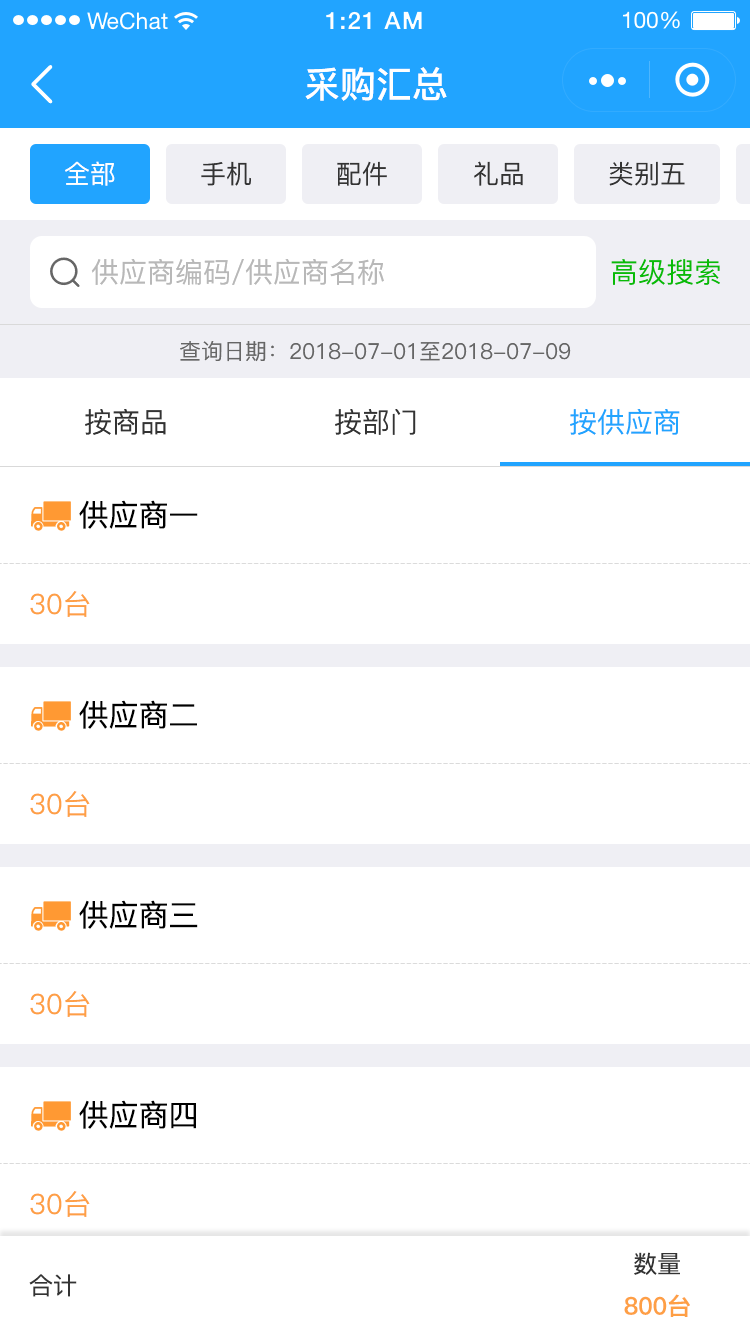
<style>
.page{position:relative;width:750px;height:1334px;background:#ffffff}
.page>*{position:absolute;margin:0}
.t1{font:36px "PingFang-SC-Bold";color:#ffffff}
.t2{font:26px "PingFang-SC-Medium";color:#ffffff}
.t3{font:26px "PingFang-SC-Medium";color:#333333}
.t4{font:28px "PingFang-SC-Medium";color:#b8b8b8}
.t5{font:28px "PingFang-SC-Medium";color:#09bb07}
.t6{font:22px "PingFang-SC-Medium";color:#666666}
.t7{font:28px "PingFang-SC-Medium";color:#333333}
.t8{font:28px "PingFang-SC-Medium";color:#21a4ff}
.t9{font:30px "PingFang-SC-Medium";color:#000000}
.t10{font:28px "PingFang-SC-Medium";color:#fe9f45}
.t11{font:24px "PingFang-SC-Medium";color:#333333}
.t12{font:24px "PingFang-SC-Bold";color:#fe9f45}
</style>
<div class="page">
<p class="t1" style="left:305px;top:67px;width:142px;height:34px">采购汇总</p>
<p class="t2" style="left:65px;top:161px;width:50px;height:25px">全部</p>
<p class="t3" style="left:201px;top:161px;width:50px;height:25px">手机</p>
<p class="t3" style="left:337px;top:161px;width:50px;height:25px">配件</p>
<p class="t3" style="left:474px;top:161px;width:49px;height:25px">礼品</p>
<p class="t3" style="left:609px;top:161px;width:76px;height:25px">类别五</p>
<p class="t4" style="left:91px;top:259px;width:293px;height:26px">供应商编码/供应商名称</p>
<p class="t5" style="left:611px;top:259px;width:109px;height:26px">高级搜索</p>
<p class="t6" style="left:180px;top:341px;width:391px;height:21px">查询日期：2018-07-01至2018-07-09</p>
<p class="t7" style="left:85px;top:409px;width:81px;height:26px">按商品</p>
<p class="t7" style="left:335px;top:409px;width:81px;height:26px">按部门</p>
<p class="t8" style="left:570px;top:409px;width:110px;height:26px">按供应商</p>
<p class="t9" style="left:79px;top:500px;width:119px;height:29px">供应商一</p>
<p class="t10" style="left:30px;top:591px;width:60px;height:26px">30台</p>
<p class="t9" style="left:79px;top:700px;width:118px;height:29px">供应商二</p>
<p class="t10" style="left:30px;top:791px;width:60px;height:26px">30台</p>
<p class="t9" style="left:79px;top:900px;width:119px;height:29px">供应商三</p>
<p class="t10" style="left:30px;top:991px;width:60px;height:26px">30台</p>
<p class="t9" style="left:79px;top:1100px;width:117px;height:29px">供应商四</p>
<p class="t10" style="left:30px;top:1191px;width:60px;height:26px">30台</p>
<p class="t11" style="left:634px;top:1252px;width:46px;height:23px">数量</p>
<p class="t11" style="left:29px;top:1274px;width:48px;height:23px">合计</p>
<p class="t12" style="left:624px;top:1294px;width:66px;height:23px">800台</p>
</div>
